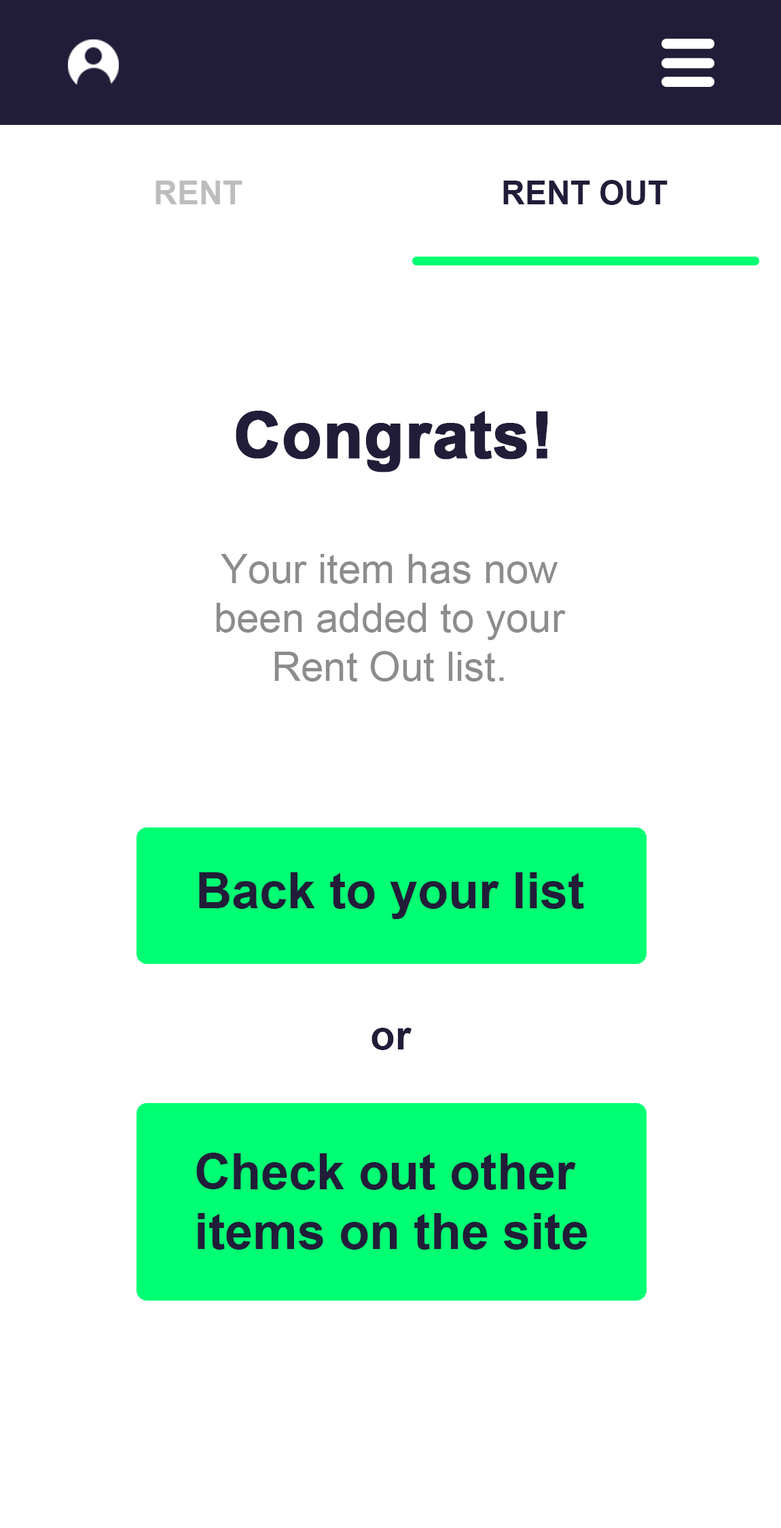
<style>
.page{position:relative;width:781px;height:1528px;background:#ffffff}
.page>*{position:absolute;margin:0}
.t1{font:32.6px "Arial-BoldMT";color:#bdbdbd;text-transform:uppercase}
.t2{font:32.6px "Arial-BoldMT";color:#211d39;text-transform:uppercase}
.t3{font:64.5px "Arial-BoldMT";color:#211d39;font-weight:bold}
.t4{font:40.7px/48.9px "ArialMT";color:#8c8c8c}
.t5{font:50px "Arial-BoldMT";color:#211d39}
.t6{font:40.7px "Arial-BoldMT";color:#211d39}
</style>
<div class="page">
<p class="t1" style="left:155px;top:181px;width:87px;height:23px">Rent</p>
<p class="t2" style="left:503px;top:180px;width:164px;height:25px">Rent Out</p>
<p class="t3" style="left:236px;top:411px;width:312px;height:61px">Congrats!</p>
<p class="t4" style="left:216px;top:554px;width:349px;height:127px;text-align:center">Your item has now<br>been added to your<br>Rent Out list.</p>
<p class="t5" style="left:199px;top:872px;width:385px;height:47px">Back to your list</p>
<p class="t6" style="left:371px;top:1028px;width:40px;height:22px">or</p>
<p class="t5" style="left:196px;top:1152px;width:391px;height:97px">Check out other <br>items on the site</p>
</div>
